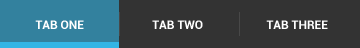
<style>
.page{position:relative;width:360px;height:48px;background:#333333}
.page>*{position:absolute;margin:0}
.t1{font:12px "Roboto-Bold";color:#ffffff}
</style>
<div class="page">
<p class="t1" style="left:35px;top:20px;width:49px;height:9px">TAB ONE</p>
<p class="t1" style="left:152px;top:20px;width:51px;height:9px">TAB TWO</p>
<p class="t1" style="left:266px;top:20px;width:62px;height:9px">TAB THREE</p>
</div>
